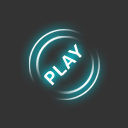
<style>
.page{position:relative;width:128px;height:128px;background:#333333}
.page>*{position:absolute;margin:0}
.t1{font:18px "GyeonggiTitleB";letter-spacing:0.05em;color:#ffffff}
</style>
<div class="page">
<p class="t1" style="left:44px;top:43px;width:38px;height:43px;rotate:-45deg">PLAY</p>
</div>
